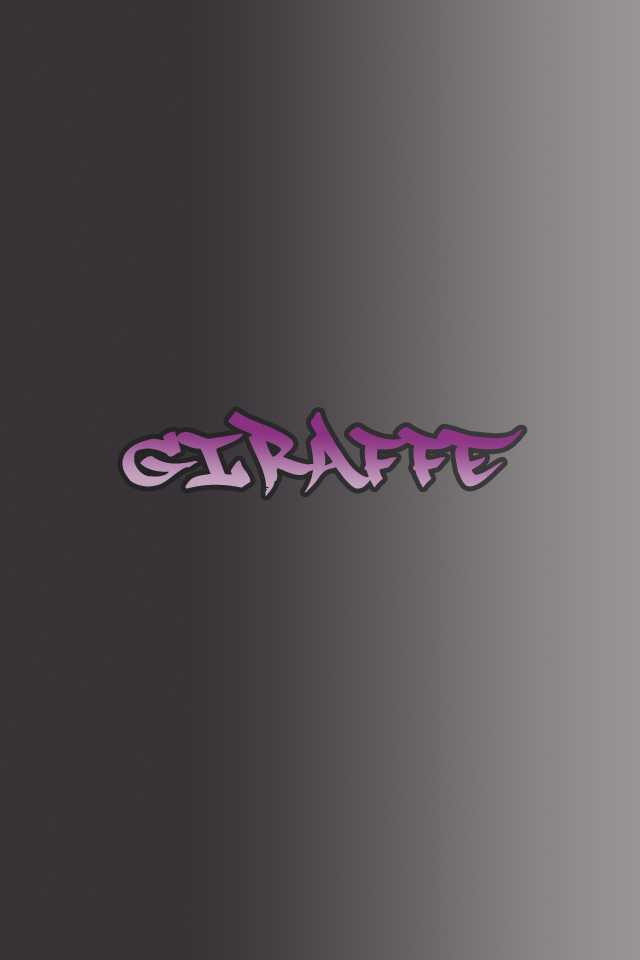
<style>
.page{position:relative;width:640px;height:960px}
.page>*{position:absolute;margin:0}
.t1{font:72px "RapScript";font-weight:bold}
</style>
<div class="page">
<p class="t1" style="left:122px;top:411px;width:401px;height:85px">GIRAFFE</p>
</div>
